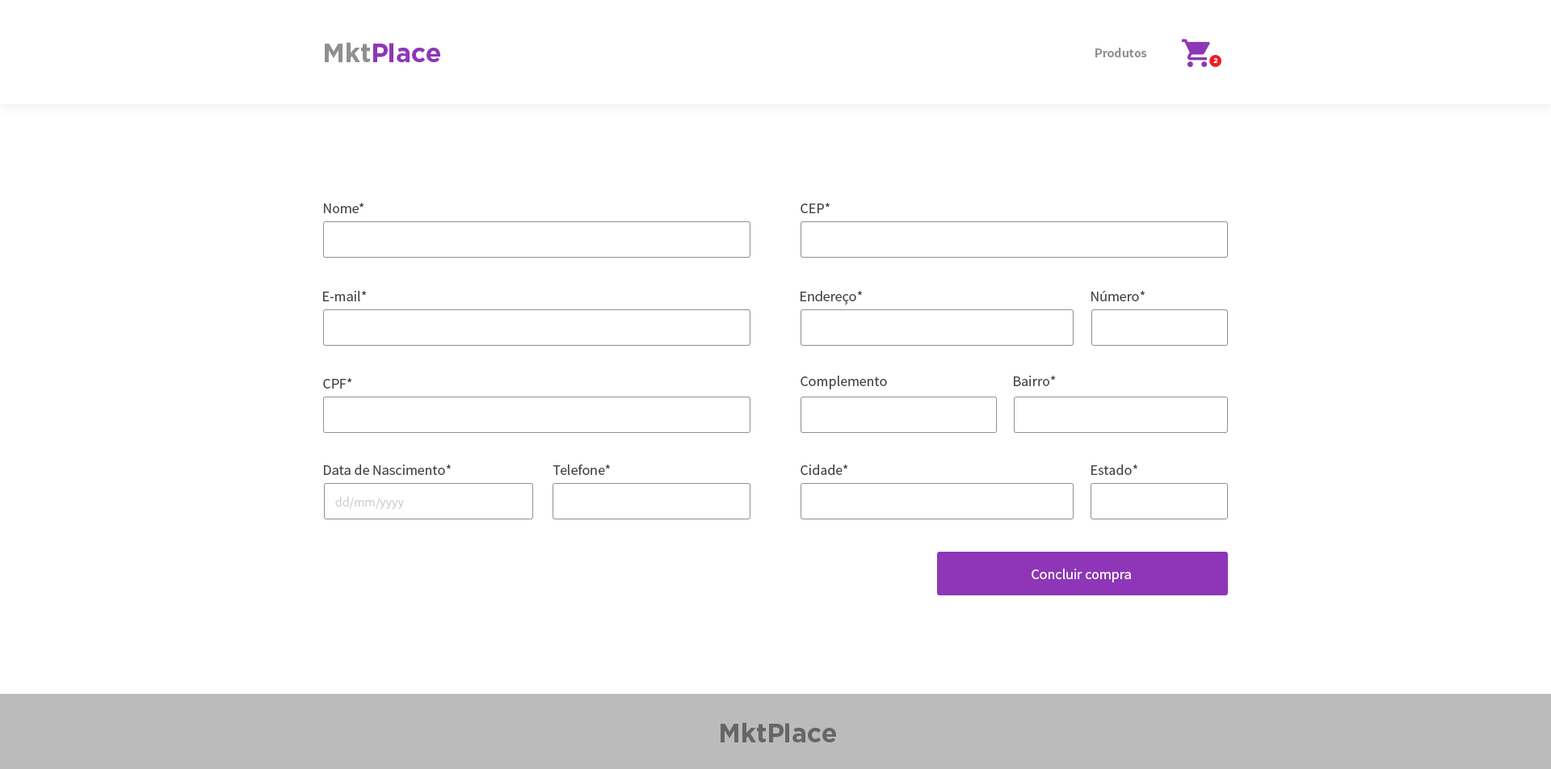
<style>
.page{position:relative;width:1551px;height:769px;background:#ffffff}
.page>*{position:absolute;margin:0}
.t1{font:12.9px "SourceSansPro-Bold";color:#909090}
.t2{font:6.5px "Gotham-Bold";color:#ffffff}
.t3{font:14.5px "SourceSansPro-Regular";color:#434343}
.t4{font:12.9px "SourceSansPro-Regular";color:#cfcfcf}
.t5{font:14.5px "SourceSansPro-Regular";color:#ffffff}
</style>
<div class="page">
<p class="t1" style="left:1095px;top:48px;width:52px;height:9px">Produtos</p>
<p class="t2" style="left:1213px;top:58px;width:4px;height:5px">2</p>
<p class="t3" style="left:324px;top:203px;width:40px;height:10px">Nome*</p>
<p class="t3" style="left:800px;top:203px;width:30px;height:10px">CEP*</p>
<p class="t3" style="left:323px;top:291px;width:44px;height:10px">E-mail*</p>
<p class="t3" style="left:800px;top:291px;width:63px;height:14px">Endereço*</p>
<p class="t3" style="left:1091px;top:291px;width:54px;height:10px">Número*</p>
<p class="t3" style="left:800px;top:376px;width:87px;height:13px">Complemento</p>
<p class="t3" style="left:1014px;top:376px;width:42px;height:10px">Bairro*</p>
<p class="t3" style="left:323px;top:378px;width:29px;height:11px">CPF*</p>
<p class="t3" style="left:324px;top:464px;width:128px;height:11px">Data de Nascimento*</p>
<p class="t3" style="left:552px;top:464px;width:59px;height:11px">Telefone*</p>
<p class="t3" style="left:800px;top:464px;width:48px;height:11px">Cidade*</p>
<p class="t3" style="left:1091px;top:464px;width:47px;height:11px">Estado*</p>
<p class="t4" style="left:335px;top:497px;width:69px;height:12px">dd/mm/yyyy</p>
<p class="t5" style="left:1031px;top:569px;width:100px;height:13px">Concluir compra</p>
</div>
